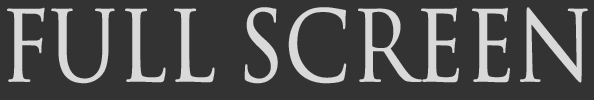
<style>
.page{position:relative;width:594px;height:100px;background:#333333}
.page>*{position:absolute;margin:0}
.t1{font:95.5px "SpaceandAstronomy";color:#d9d9d9;scale:0.87 1}
</style>
<div class="page">
<p class="t1" style="left:7px;top:7px;width:581px;height:77px">Full Screen</p>
</div>
